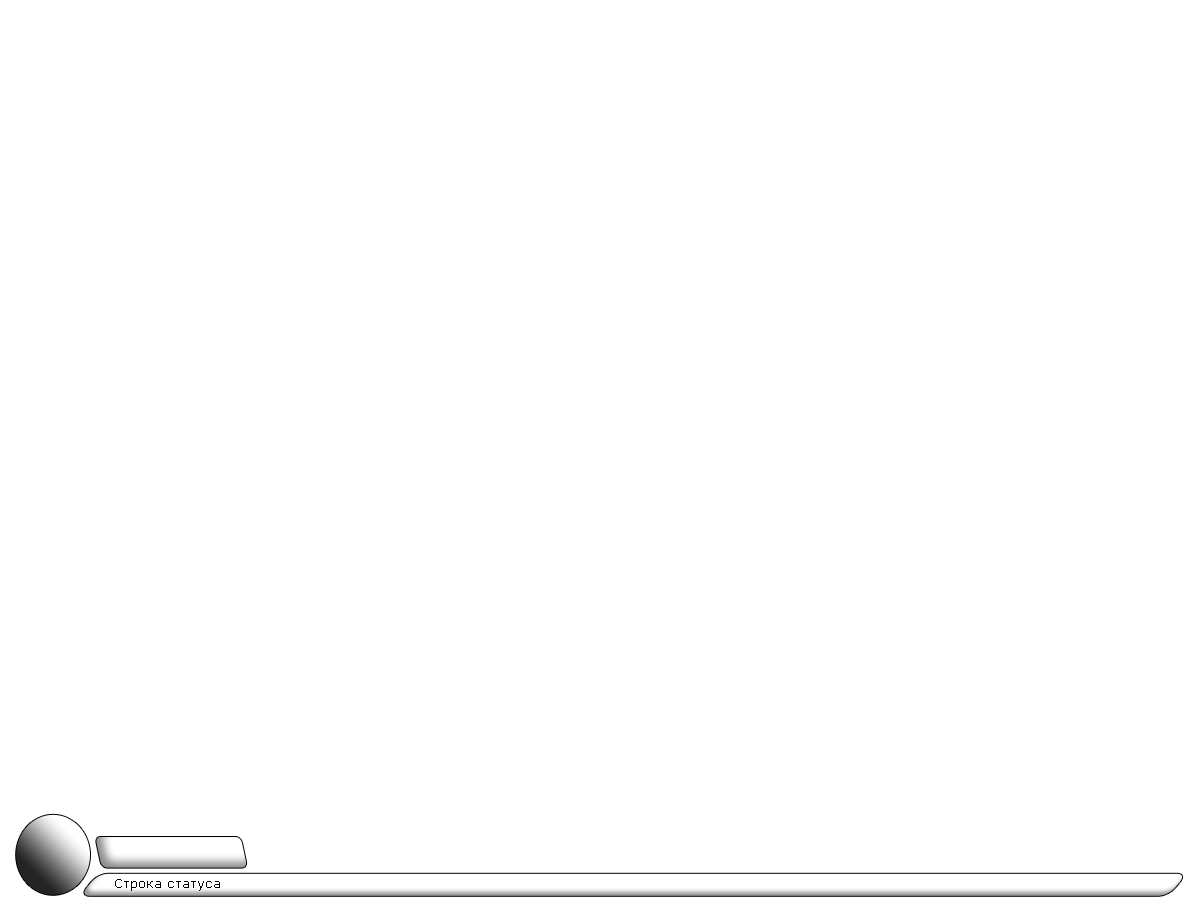
<style>
.page{position:relative;width:1200px;height:900px;background:#ffffff}
.page>*{position:absolute;margin:0}
.t1{font:12px "Verdana";color:#000000}
</style>
<div class="page">
<p class="t1" style="left:115px;top:879px;width:105px;height:12px">Строка статуса</p>
</div>
